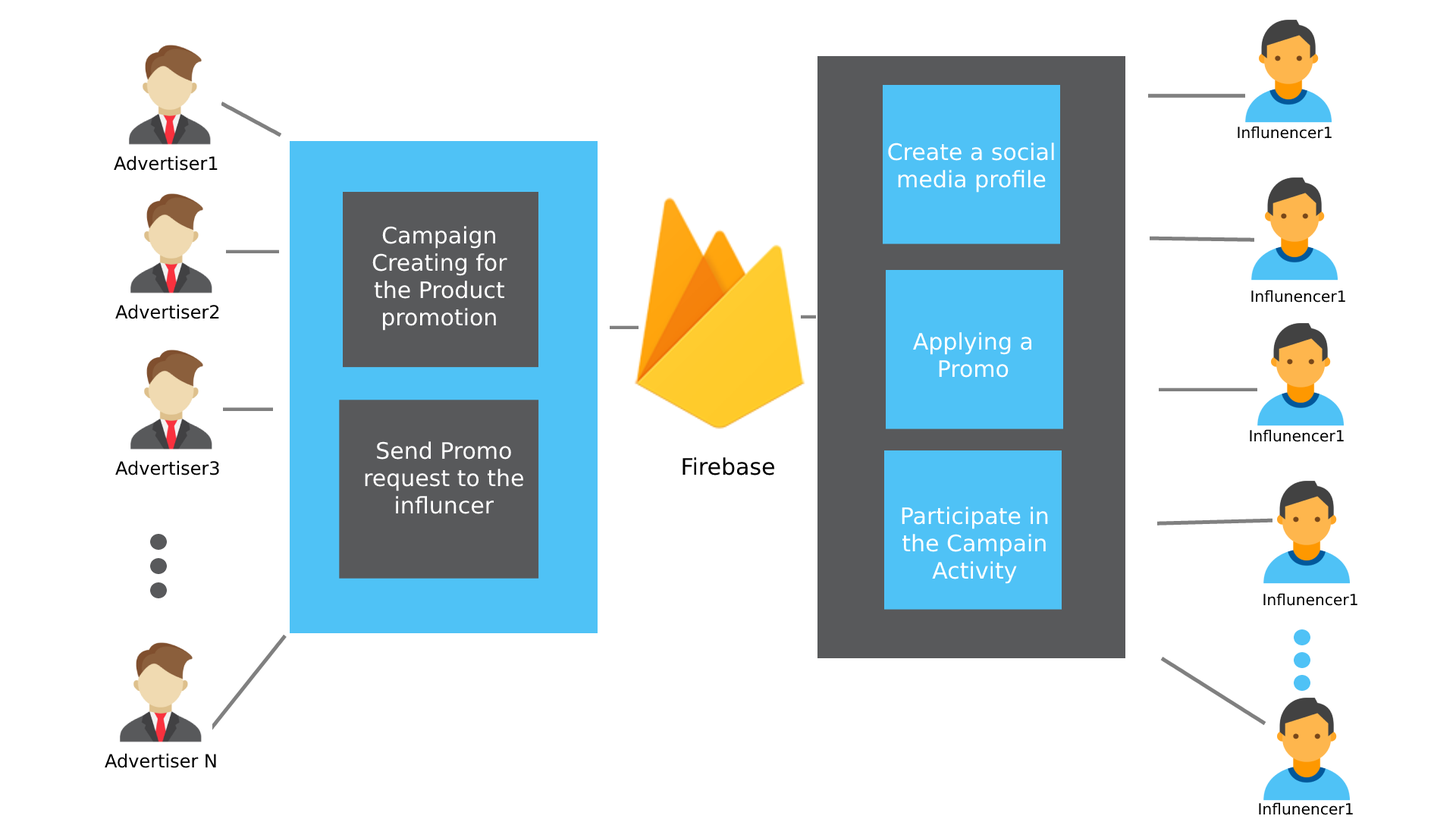
<style>
.page{position:relative;width:1456px;height:819px;background:#ffffff}
.page>*{position:absolute;margin:0}
.t1{font:15.3px "DejaVuSans";color:#000000}
.t2{font:22.7px "DejaVuSans";color:#ffffff}
.t3{font:18.2px "DejaVuSans";color:#000000}
.t4{font:22.7px "DejaVuSans";color:#000000}
</style>
<div class="page">
<p class="t1" style="left:1238px;top:126px;width:94px;height:13px">Influnencer1</p>
<p class="t2" style="left:888px;top:143px;width:166px;height:50px;text-align:center">Create a social media profile</p>
<p class="t3" style="left:114px;top:155px;width:104px;height:16px">Advertiser1</p>
<p class="t2" style="left:372px;top:226px;width:135px;height:105px;text-align:center">Campaign Creating for the Product promotion</p>
<p class="t1" style="left:1251px;top:290px;width:94px;height:13px">Influnencer1</p>
<p class="t3" style="left:115px;top:304px;width:104px;height:15px">Advertiser2</p>
<p class="t2" style="left:913px;top:332px;width:119px;height:46px;text-align:center">Applying a Promo</p>
<p class="t1" style="left:1250px;top:429px;width:94px;height:13px">Influnencer1</p>
<p class="t2" style="left:365px;top:441px;width:158px;height:73px;text-align:center">Send Promo request to the influncer</p>
<p class="t3" style="left:115px;top:460px;width:104px;height:15px">Advertiser3</p>
<p class="t4" style="left:682px;top:457px;width:92px;height:18px">Firebase</p>
<p class="t2" style="left:902px;top:507px;width:146px;height:77px;text-align:center">Participate in the Campain Activity</p>
<p class="t1" style="left:1263px;top:593px;width:94px;height:13px">Influnencer1</p>
<p class="t3" style="left:105px;top:753px;width:111px;height:15px">Advertiser N</p>
<p class="t1" style="left:1259px;top:802px;width:94px;height:13px">Influnencer1</p>
</div>
